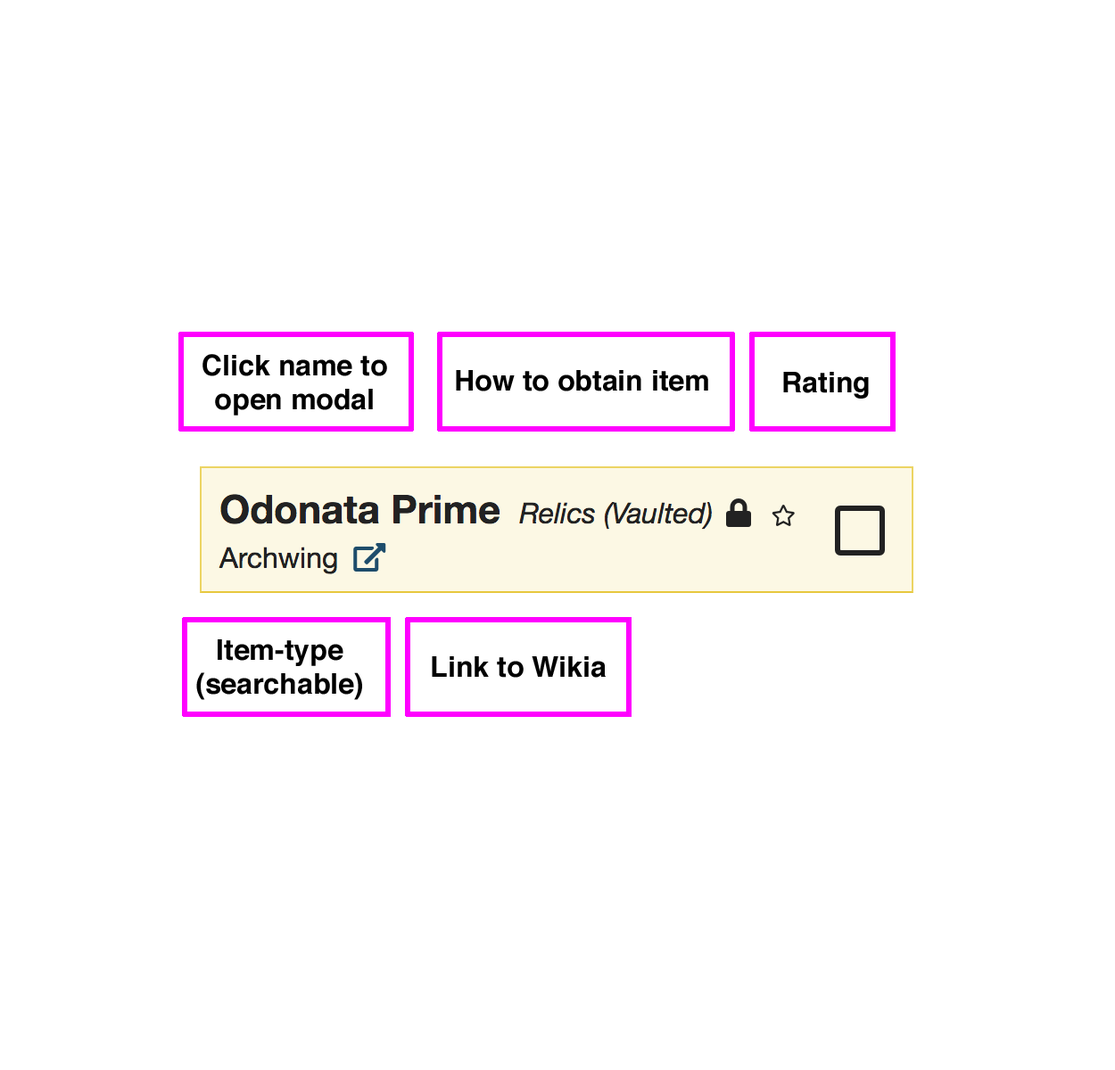
<style>
.page{position:relative;width:1115px;height:1070px;background:#ffffff}
.page>*{position:absolute;margin:0}
.t1{font:28.5px "Helvetica-Bold";color:#000000}
</style>
<div class="page">
<p class="t1" style="left:202px;top:354px;width:185px;height:61px;text-align:center">Click name to<br>open modal</p>
<p class="t1" style="left:456px;top:370px;width:252px;height:21px">How to obtain item</p>
<p class="t1" style="left:783px;top:372px;width:85px;height:27px">Rating</p>
<p class="t1" style="left:196px;top:639px;width:166px;height:61px;text-align:center">Item-type<br>(searchable)</p>
<p class="t1" style="left:432px;top:656px;width:173px;height:22px">Link to Wikia</p>
</div>
